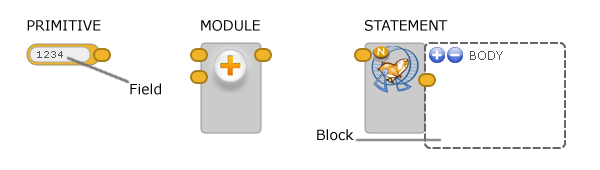
<style>
.page{position:relative;width:600px;height:170px;background:#ffffff}
.page>*{position:absolute;margin:0}
.t1{font:14px "Verdana";color:#000000}
</style>
<div class="page">
<p class="t1" style="left:27px;top:20px;width:421px;height:11px">PRIMITIVE        MODULE                     STATEMENT</p>
<p class="t1" style="left:130px;top:83px;width:31px;height:12px">Field</p>
<p class="t1" style="left:317px;top:129px;width:37px;height:12px">Block</p>
</div>
